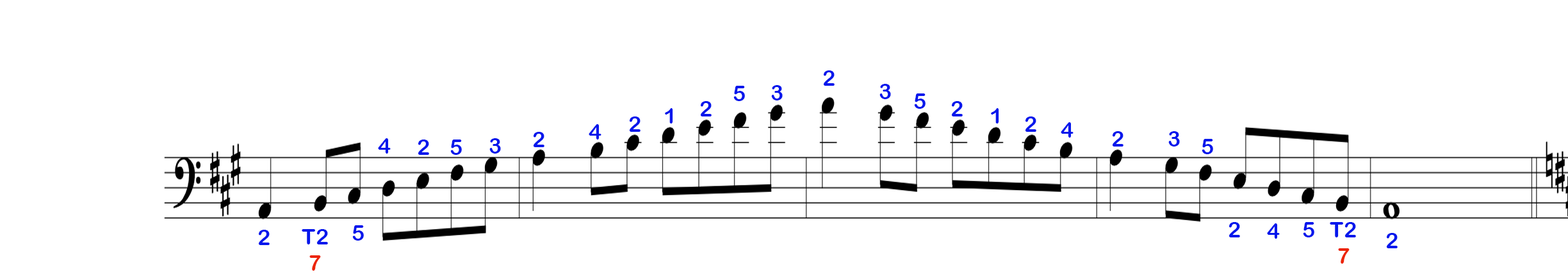
<style>
.page{position:relative;width:1568px;height:279px;background:#ffffff}
.page>*{position:absolute;margin:0}
.t1{font:21.8px "ArialRoundedMTBold";color:#0417ec}
.t2{font:21.8px "ArialRoundedMTBold";color:#ec2404}
</style>
<div class="page">
<p class="t1" style="left:823px;top:70px;width:12px;height:16px">2</p>
<p class="t1" style="left:733px;top:86px;width:12px;height:15px">5</p>
<p class="t1" style="left:771px;top:85px;width:12px;height:16px">3</p>
<p class="t1" style="left:879px;top:84px;width:12px;height:15px">3</p>
<p class="t1" style="left:700px;top:101px;width:12px;height:16px">2</p>
<p class="t1" style="left:914px;top:94px;width:12px;height:15px">5</p>
<p class="t1" style="left:951px;top:101px;width:12px;height:16px">2</p>
<p class="t1" style="left:665px;top:108px;width:8px;height:16px">1</p>
<p class="t1" style="left:991px;top:108px;width:8px;height:16px">1</p>
<p class="t1" style="left:589px;top:124px;width:12px;height:16px">4</p>
<p class="t1" style="left:629px;top:117px;width:12px;height:15px">2</p>
<p class="t1" style="left:1025px;top:117px;width:11px;height:15px">2</p>
<p class="t1" style="left:1061px;top:122px;width:13px;height:16px">4</p>
<p class="t1" style="left:533px;top:132px;width:11px;height:15px">2</p>
<p class="t1" style="left:1112px;top:131px;width:11px;height:16px">2</p>
<p class="t1" style="left:1168px;top:131px;width:12px;height:16px">3</p>
<p class="t1" style="left:378px;top:138px;width:13px;height:16px">4</p>
<p class="t1" style="left:418px;top:140px;width:11px;height:15px">2</p>
<p class="t1" style="left:450px;top:140px;width:12px;height:15px">5</p>
<p class="t1" style="left:489px;top:138px;width:12px;height:16px">3</p>
<p class="t1" style="left:1202px;top:139px;width:11px;height:15px">5</p>
<p class="t1" style="left:258px;top:230px;width:12px;height:15px">2</p>
<p class="t1" style="left:302px;top:229px;width:26px;height:16px">T2</p>
<p class="t1" style="left:352px;top:225px;width:12px;height:16px">5</p>
<p class="t1" style="left:1229px;top:222px;width:11px;height:16px">2</p>
<p class="t1" style="left:1267px;top:224px;width:13px;height:15px">4</p>
<p class="t1" style="left:1303px;top:222px;width:11px;height:16px">5</p>
<p class="t1" style="left:1330px;top:222px;width:26px;height:16px">T2</p>
<p class="t1" style="left:1386px;top:233px;width:12px;height:16px">2</p>
<p class="t2" style="left:309px;top:256px;width:12px;height:15px">7</p>
<p class="t2" style="left:1338px;top:249px;width:12px;height:15px">7</p>
</div>
